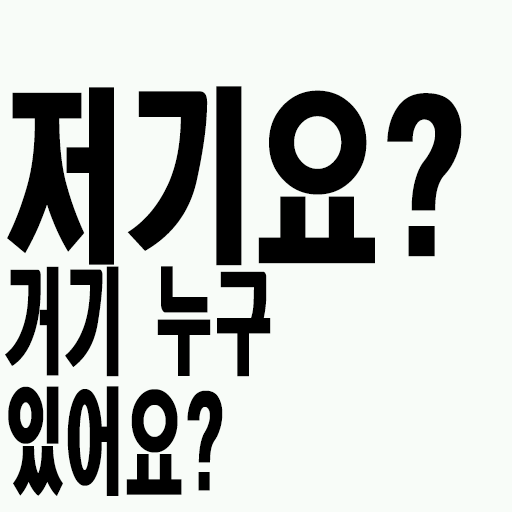
<style>
.page{position:relative;width:512px;height:512px;background:#f8fcf8}
.page>*{position:absolute;margin:0}
.t1{font:186.2px "HeadlineR-HM";color:#000000;scale:0.68 1}
.t2{font:114px/120px "HeadlineR-HM";color:#000000;scale:0.53 1}
</style>
<div class="page">
<p class="t1" style="left:7px;top:86px;width:455px;height:180px">저기요?</p>
<p class="t2" style="left:5px;top:266px;width:266px;height:230px">거기 누구<br>있어요?</p>
</div>
